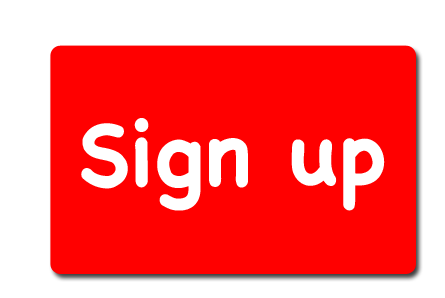
<style>
.page{position:relative;width:445px;height:298px;background:#ff0000}
.page>*{position:absolute;margin:0}
.t1{font:89.5px "ChalkboardSE-Bold";color:#ffffff}
</style>
<div class="page">
<p class="t1" style="left:81px;top:118px;width:304px;height:93px">Sign up</p>
</div>
